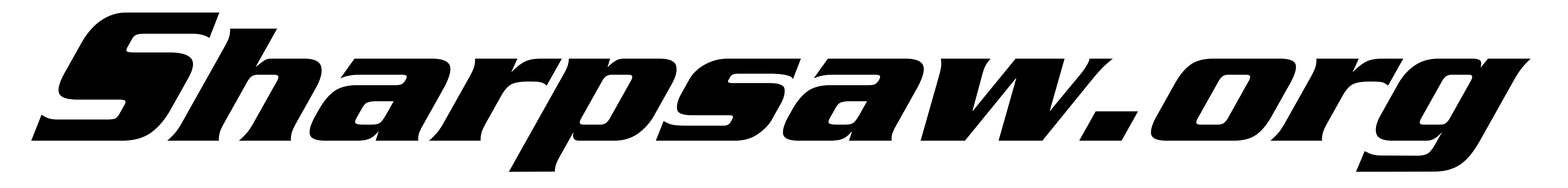
<style>
.page{position:relative;width:1568px;height:188px;background:#ffffff}
.page>*{position:absolute;margin:0}
.t1{font:186.9px "Serpentine-Bold-Bold";letter-spacing:0.01em;color:#000000;font-style:italic;scale:0.96 1}
.t2{font:213.6px "Serpentine-Bold-Bold";letter-spacing:0.01em;color:#000000;font-style:italic;scale:0.96 1}
</style>
<div class="page">
<p class="t1" style="left:31px;top:13px;width:1500px;height:159px"><span class="t2">S</span>harpsaw.org</p>
</div>
